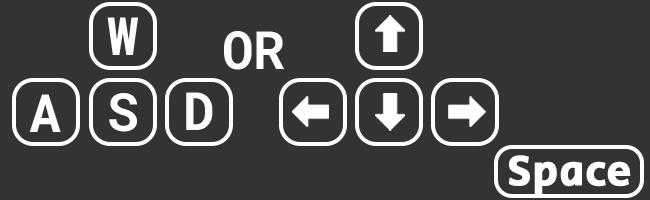
<style>
.page{position:relative;width:650px;height:200px;background:#333333}
.page>*{position:absolute;margin:0}
.t1{font:52.8px "RobotoMono-Bold";color:#ffffff;font-weight:bold}
.t2{font:43.8px "SecularOne-Regular";color:#ffffff;font-weight:bold}
</style>
<div class="page">
<p class="t1" style="left:107px;top:17px;width:31px;height:38px">W</p>
<p class="t1" style="left:224px;top:31px;width:60px;height:39px">OR</p>
<p class="t1" style="left:29px;top:94px;width:32px;height:38px">A</p>
<p class="t1" style="left:109px;top:93px;width:28px;height:39px">S</p>
<p class="t1" style="left:186px;top:92px;width:27px;height:38px">D</p>
<p class="t2" style="left:509px;top:155px;width:122px;height:40px">Space</p>
</div>
